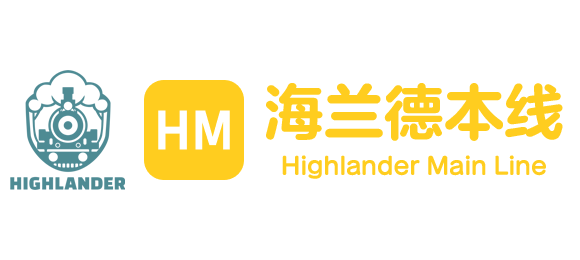
<style>
.page{position:relative;width:580px;height:260px;background:#ffffff}
.page>*{position:absolute;margin:0}
.t1{font:24px/72px "toolboxYuanGBK-ExtraBold";color:#ffce1f}
.t2{font:60px/72px "toolboxYuanGBK-ExtraBold";color:#ffce1f}
</style>
<div class="page">
<p class="t1" style="left:266px;top:83px;width:297px;height:96px;text-align:center"><span class="t2">海兰德本线<br></span>Highlander Main Line</p>
</div>
